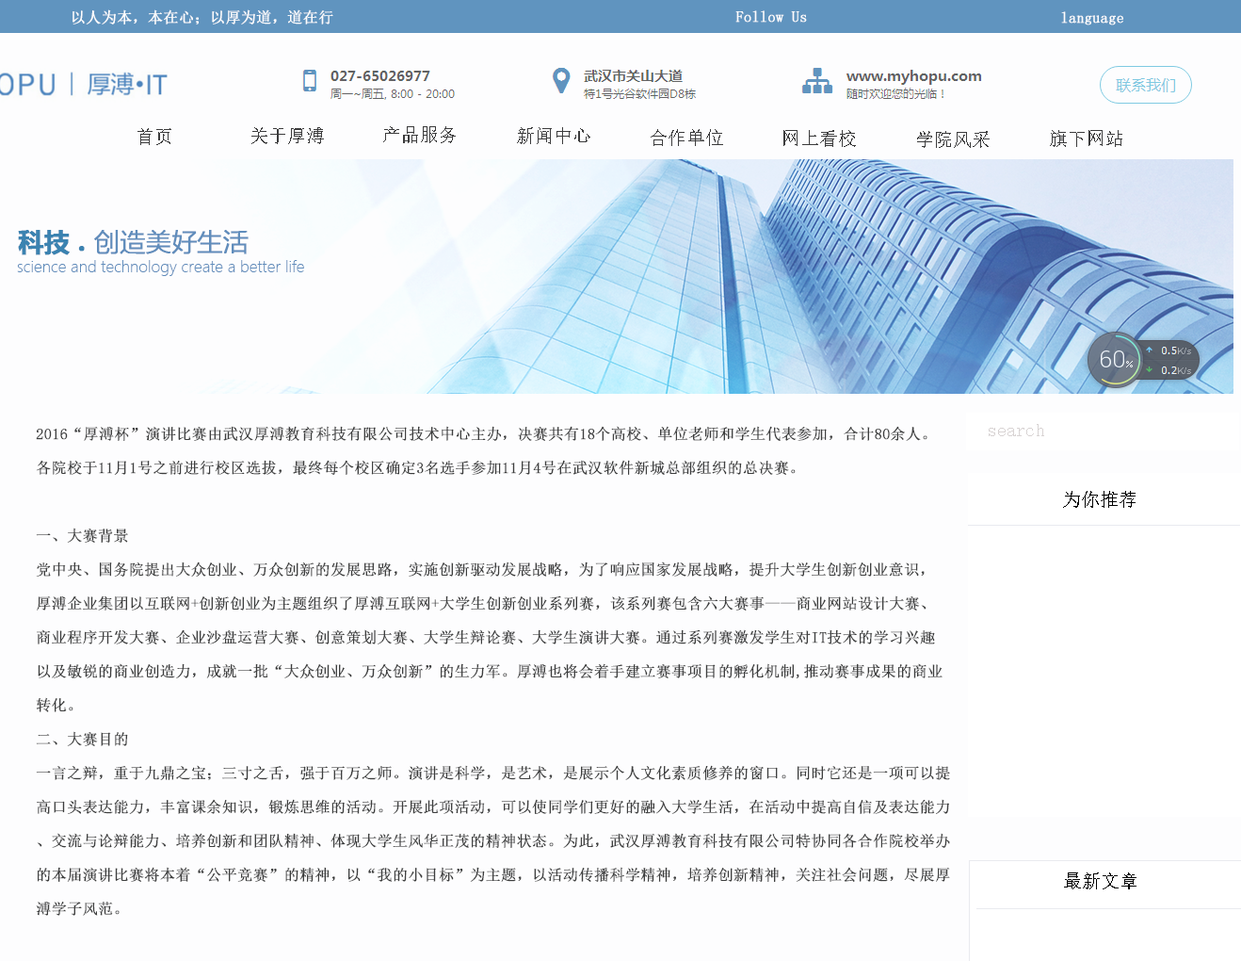
<style>
.page{position:relative;width:1241px;height:961px;background:#fdfdfe}
.page>*{position:absolute;margin:0}
.t1{font:15.1px "SimSun";letter-spacing:0.002em;color:#ffffff;font-weight:bold}
.t2{font:18.8px "SimSun";letter-spacing:0.002em;color:#3b3b3c}
.t3{font:15.1px/33.9px "SimSun";letter-spacing:0.002em;color:#3d3e3e;font-weight:bold}
.t4{font:18.8px "SimSun";letter-spacing:0.002em;color:#d8d3d3}
.t5{font:18.8px "SimSun";letter-spacing:0.002em;color:#000000}
</style>
<div class="page">
<p class="t1" style="left:73px;top:9px;width:260px;height:15px">以人为本，本在心；以厚为道，道在行</p>
<p class="t1" style="left:736px;top:10px;width:71px;height:13px">Follow Us</p>
<p class="t1" style="left:1061px;top:11px;width:63px;height:14px">language</p>
<p class="t2" style="left:138px;top:128px;width:33px;height:17px">首页</p>
<p class="t2" style="left:251px;top:127px;width:73px;height:17px">关于厚溥</p>
<p class="t2" style="left:383px;top:126px;width:73px;height:17px">产品服务</p>
<p class="t2" style="left:517px;top:127px;width:74px;height:17px">新闻中心</p>
<p class="t2" style="left:651px;top:129px;width:72px;height:17px">合作单位</p>
<p class="t2" style="left:784px;top:130px;width:72px;height:17px">网上看校</p>
<p class="t2" style="left:917px;top:131px;width:73px;height:17px">学院风采</p>
<p class="t2" style="left:1050px;top:130px;width:73px;height:17px">旗下网站</p>
<p class="t3" style="left:36px;top:426px;width:914px;height:489px">2016“厚溥杯”演讲比赛由武汉厚溥教育科技有限公司技术中心主办，决赛共有18个高校、单位老师和学生代表参加，合计80余人。<br>各院校于11月1号之前进行校区选拔，最终每个校区确定3名选手参加11月4号在武汉软件新城总部组织的总决赛。<br><br>一、大赛背景<br>党中央、国务院提出大众创业、万众创新的发展思路，实施创新驱动发展战略，为了响应国家发展战略，提升大学生创新创业意识，<br>厚溥企业集团以互联网+创新创业为主题组织了厚溥互联网+大学生创新创业系列赛，该系列赛包含六大赛事——商业网站设计大赛、<br>商业程序开发大赛、企业沙盘运营大赛、创意策划大赛、大学生辩论赛、大学生演讲大赛。通过系列赛激发学生对IT技术的学习兴趣<br>以及敏锐的商业创造力，成就一批“大众创业、万众创新”的生力军。厚溥也将会着手建立赛事项目的孵化机制,推动赛事成果的商业<br>转化。<br>二、大赛目的<br>一言之辩，重于九鼎之宝；三寸之舌，强于百万之师。演讲是科学，是艺术，是展示个人文化素质修养的窗口。同时它还是一项可以提<br>高口头表达能力，丰富课余知识，锻炼思维的活动。开展此项活动，可以使同学们更好的融入大学生活，在活动中提高自信及表达能力<br>、交流与论辩能力、培养创新和团队精神、体现大学生风华正茂的精神状态。为此，武汉厚溥教育科技有限公司特协同各合作院校举办<br>的本届演讲比赛将本着“公平竞赛”的精神，以“我的小目标”为主题，以活动传播科学精神，培养创新精神，关注社会问题，尽展厚<br>溥学子风范。</p>
<p class="t4" style="left:989px;top:424px;width:55px;height:12px">search</p>
<p class="t5" style="left:1063px;top:491px;width:73px;height:17px">为你推荐</p>
<p class="t5" style="left:1064px;top:872px;width:73px;height:17px">最新文章</p>
</div>
